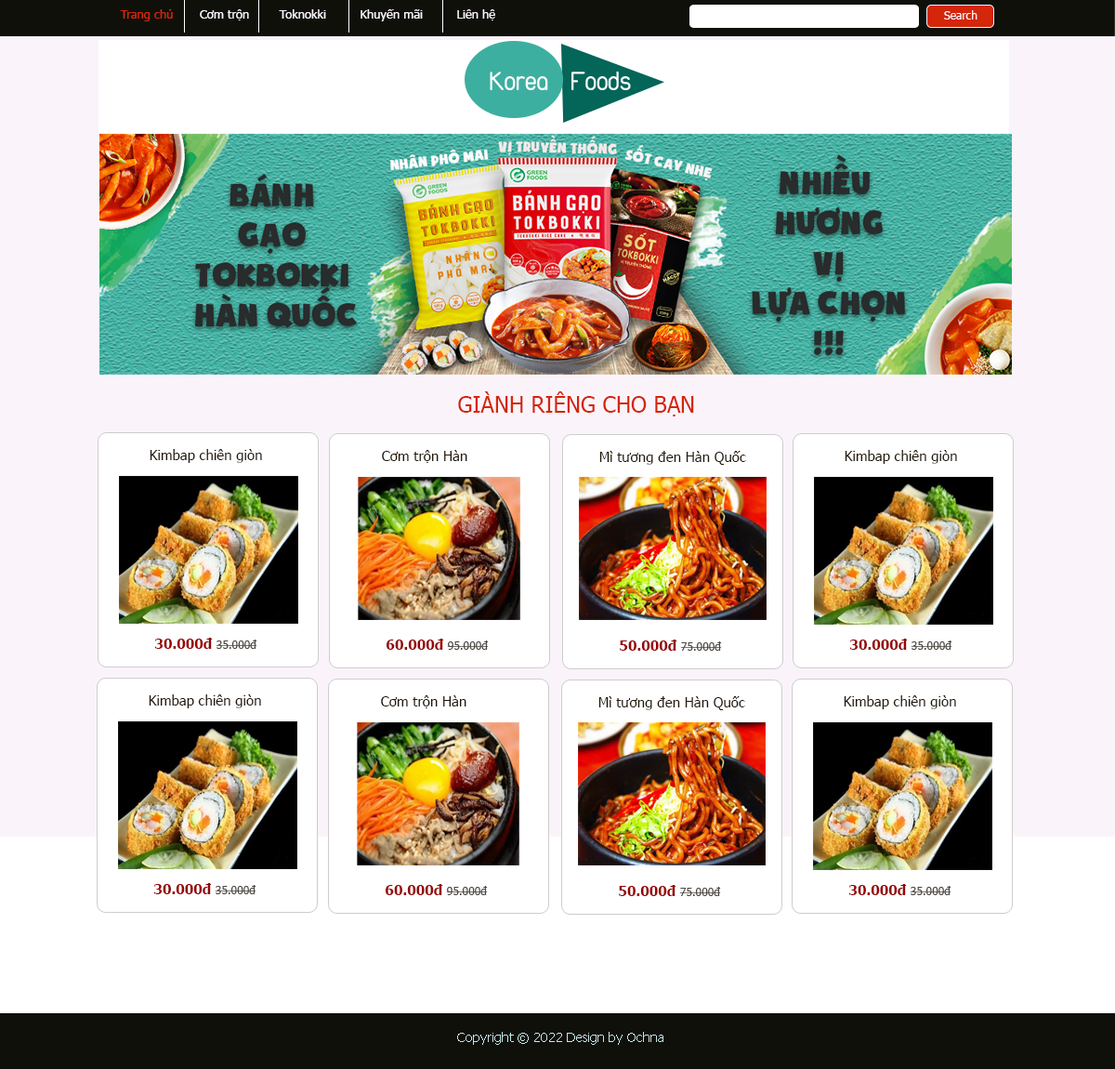
<style>
.page{position:relative;width:1115px;height:1069px;background:#ffffff}
.page>*{position:absolute;margin:0}
.t1{font:12.1px "Tahoma";color:#faf4fa}
.t2{font:12.1px "Tahoma";color:#d42608}
.t3{font:11.2px "Tahoma";color:#faf4fa}
.t4{font:27.9px "UTM-Duepuntozero";color:#ffffff}
.t5{font:22.3px "Tahoma";color:#d42608}
.t6{font:13.9px "Tahoma";color:#211607}
.t7{font:13.9px "Tahoma-Bold";color:#970505}
.t8{font:11.2px "Tahoma";color:#4c4741}
.t9{font:13px "Tahoma";color:#c7e8e8}
</style>
<div class="page">
<p class="t1" style="left:120px;top:9px;width:375px;height:12px"><span class="t2">Trang chủ </span>      Cơm trộn        Toknokki         Khuyến mãi         Liên hệ</p>
<p class="t3" style="left:944px;top:10px;width:34px;height:10px">Search</p>
<p class="t4" style="left:490px;top:71px;width:141px;height:19px">Korea   Foods</p>
<p class="t5" style="left:458px;top:391px;width:236px;height:25px">GIÀNH RIÊNG CHO BẠN</p>
<p class="t6" style="left:150px;top:449px;width:112px;height:14px">Kimbap chiên giòn</p>
<p class="t6" style="left:382px;top:450px;width:86px;height:13px">Cơm trộn Hàn</p>
<p class="t6" style="left:845px;top:450px;width:112px;height:14px">Kimbap chiên giòn</p>
<p class="t6" style="left:600px;top:451px;width:146px;height:14px">Mì tương đen Hàn Quốc</p>
<p class="t7" style="left:155px;top:638px;width:102px;height:11px">30.000đ <span class="t8">35.000đ</span></p>
<p class="t7" style="left:387px;top:639px;width:102px;height:11px">60.000đ <span class="t8">95.000đ</span></p>
<p class="t7" style="left:620px;top:640px;width:102px;height:11px">50.000đ <span class="t8">75.000đ</span></p>
<p class="t7" style="left:851px;top:639px;width:102px;height:11px">30.000đ <span class="t8">35.000đ</span></p>
<p class="t6" style="left:149px;top:694px;width:112px;height:14px">Kimbap chiên giòn</p>
<p class="t6" style="left:381px;top:695px;width:86px;height:13px">Cơm trộn Hàn</p>
<p class="t6" style="left:599px;top:696px;width:147px;height:14px">Mì tương đen Hàn Quốc</p>
<p class="t6" style="left:844px;top:695px;width:113px;height:14px">Kimbap chiên giòn</p>
<p class="t7" style="left:154px;top:883px;width:103px;height:11px">30.000đ <span class="t8">35.000đ</span></p>
<p class="t7" style="left:386px;top:884px;width:102px;height:11px">60.000đ <span class="t8">95.000đ</span></p>
<p class="t7" style="left:619px;top:885px;width:102px;height:11px">50.000đ <span class="t8">75.000đ</span></p>
<p class="t7" style="left:850px;top:884px;width:102px;height:11px">30.000đ <span class="t8">35.000đ</span></p>
<p class="t9" style="left:457px;top:1032px;width:207px;height:13px">Copyright © 2022 Design by Ochna</p>
</div>
